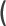
<style>
.page{position:relative;width:6px;height:26px;background:#ffffff}
.page>*{position:absolute;margin:0}
.t1{font:30px "Calibri";color:#3c3c3c}
</style>
<div class="page">
<p class="t1" style="left:0px;top:0px;width:6px;height:26px">(</p>
</div>
